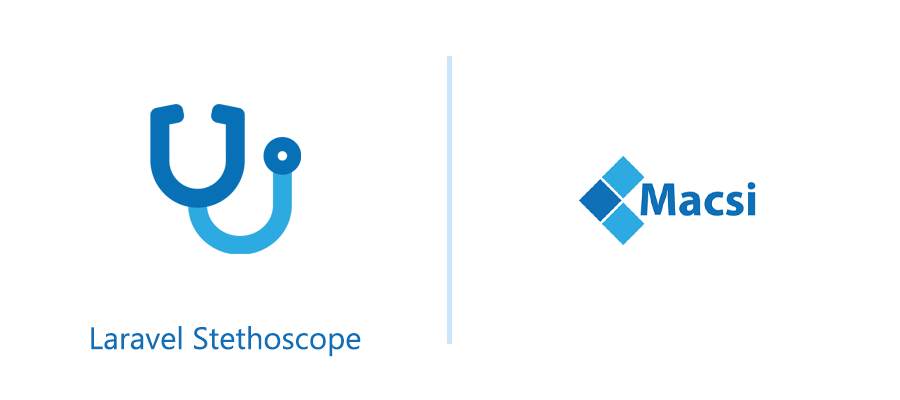
<style>
.page{position:relative;width:900px;height:400px;background:#ffffff}
.page>*{position:absolute;margin:0}
.t1{font:30.9px "Gadugi";color:#0f70b7}
</style>
<div class="page">
<p class="t1" style="left:91px;top:326px;width:270px;height:31px">Laravel Stethoscope</p>
</div>
